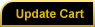
<style>
.page{position:relative;width:95px;height:27px;background:#000000}
.page>*{position:absolute;margin:0}
.t1{font:12px "Arial-BoldMT";color:#ddba13}
.t2{font:12px "Arial-BoldMT";letter-spacing:0.025em;color:#ddba13}
</style>
<div class="page">
<p class="t1" style="left:16px;top:9px;width:68px;height:12px">Update Ca<span class="t2">rt</span></p>
</div>
